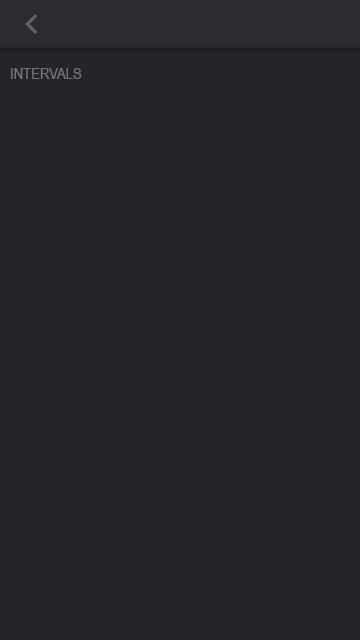
<style>
.page{position:relative;width:360px;height:640px;background:#24252b}
.page>*{position:absolute;margin:0}
.t1{font:16px "ArialNarrow";color:#737476}
</style>
<div class="page">
<p class="t1" style="left:11px;top:68px;width:71px;height:11px">INTERVALS</p>
</div>
